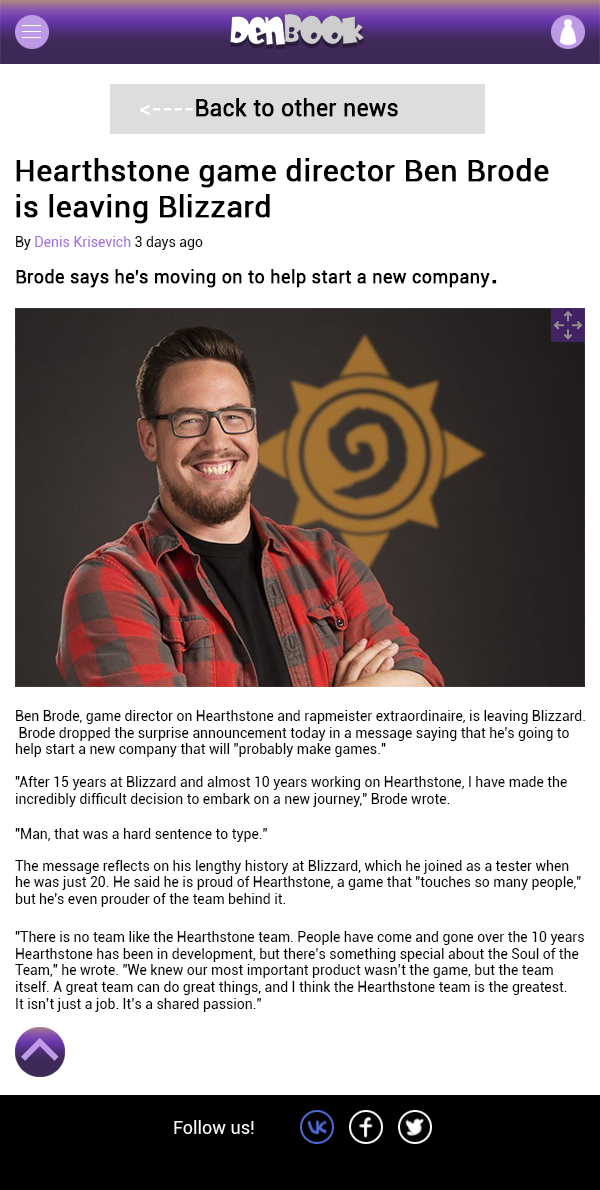
<style>
.page{position:relative;width:600px;height:1190px;background:#ffffff}
.page>*{position:absolute;margin:0}
.t1{font:22.5px "Roboto-Regular";color:#000000;font-weight:bold}
.t2{font:22.5px "Roboto-Regular";color:#ffffff;font-weight:bold}
.t3{font:30px "Roboto-Regular";color:#000000;font-weight:bold}
.t4{font:18px "Roboto-Regular";color:#000000;font-weight:bold}
.t5{font:14px "Roboto-Regular";color:#000000}
.t6{font:14px "Roboto-Regular";color:#a371e2}
</style>
<div class="page">
<p class="t1" style="left:140px;top:98px;width:258px;height:19px"><span class="t2">&lt;----</span>Back to other news</p>
<p class="t3" style="left:16px;top:158px;width:533px;height:66px">Hearthstone game director Ben Brode <br>is leaving Blizzard</p>
<p class="t4" style="left:16px;top:236px;width:481px;height:52px"><span class="t5">By </span><span class="t6">Denis Krisevich </span><span class="t5">3 days ago<br></span>Brode says he's moving on to help start a new company<span class="t3">.</span></p>
<p class="t5" style="left:15px;top:710px;width:570px;height:47px">Ben Brode, game director on Hearthstone and rapmeister extraordinaire, is leaving Blizzard.<br> Brode dropped the surprise announcement today in a message saying that he's going to <br>help start a new company that will "probably make games."</p>
<p class="t5" style="left:15px;top:776px;width:552px;height:31px">"After 15 years at Blizzard and almost 10 years working on Hearthstone, I have made the <br>incredibly difficult decision to embark on a new journey," Brode wrote.</p>
<p class="t5" style="left:15px;top:828px;width:252px;height:14px">"Man, that was a hard sentence to type."</p>
<p class="t5" style="left:15px;top:860px;width:566px;height:47px">The message reflects on his lengthy history at Blizzard, which he joined as a tester when <br>he was just 20. He said he is proud of Hearthstone, a game that "touches so many people," <br>but he's even prouder of the team behind it.</p>
<p class="t5" style="left:15px;top:931px;width:569px;height:81px">"There is no team like the Hearthstone team. People have come and gone over the 10 years <br>Hearthstone has been in development, but there’s something special about the Soul of the <br>Team," he wrote. "We knew our most important product wasn’t the game, but the team <br>itself. A great team can do great things, and I think the Hearthstone team is the greatest. <br>It isn’t just a job. It’s a shared passion."</p>
</div>
